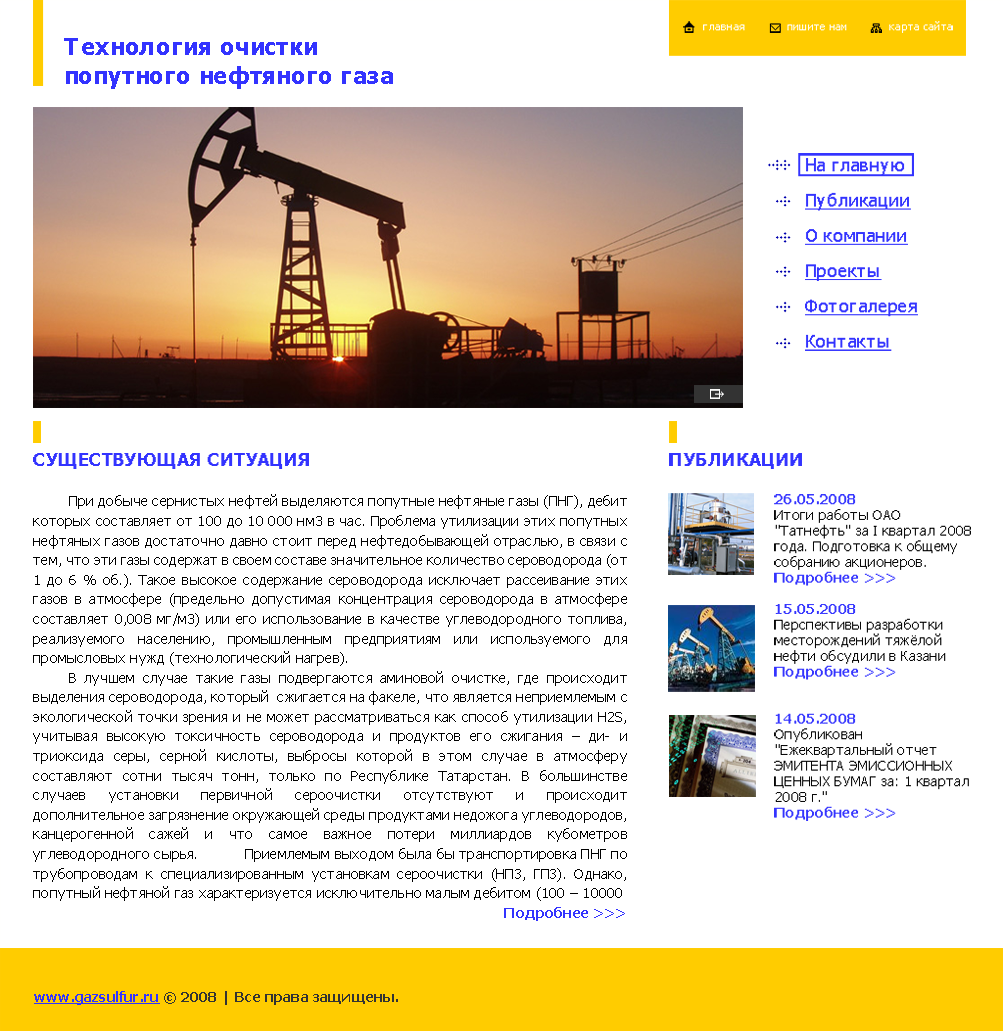
<style>
.page{position:relative;width:1003px;height:1031px;background:#ffffff}
.page>*{position:absolute;margin:0}
.t1{font:10.8px "Tahoma";letter-spacing:0.025em;color:#ffffff}
.t2{font:23.4px/29.4px "Tahoma-Bold";letter-spacing:0.025em;color:#3333ff}
.t3{font:17.6px/35.2px "Tahoma";letter-spacing:0.025em;color:#3333ff;text-decoration:underline}
.t4{font:17.6px/35.2px "Tahoma";letter-spacing:0.025em;color:#3333ff}
.t5{font:17.6px "Tahoma-Bold";letter-spacing:0.025em;color:#3333ff;text-transform:uppercase}
.t6{font:13.7px/19.6px "Tahoma";letter-spacing:0.025em;color:#000000}
.t7{font:13.7px/15.7px "Tahoma-Bold";letter-spacing:0.025em;color:#3333ff}
.t8{font:13.7px/15.7px "Tahoma";letter-spacing:0.025em;color:#000000}
.t9{font:13.7px "Tahoma-Bold";letter-spacing:0.025em;color:#333333}
.t10{font:13.7px "Tahoma-Bold";letter-spacing:0.025em;color:#3333ff;text-decoration:underline}
</style>
<div class="page">
<p class="t1" style="left:703px;top:21px;width:250px;height:12px">главная             пишите нам             карта сайта</p>
<p class="t2" style="left:64px;top:38px;width:329px;height:51px">Технология очистки <br>попутного нефтяного газа</p>
<p class="t3" style="left:805px;top:158px;width:113px;height:193px"><span class="t4">На главную<br></span>Публикации<br>О компании<br>Проекты<br>Фотогалерея<br>Контакты</p>
<p class="t5" style="left:33px;top:453px;width:276px;height:16px">Существующая ситуация</p>
<p class="t5" style="left:669px;top:453px;width:133px;height:16px">публикации</p>
<p class="t6" style="left:33px;top:494px;width:594px;height:427px;text-align:justify">При добыче сернистых нефтей выделяются попутные нефтяные газы (ПНГ), дебит которых составляет от 100 до 10 000 нм3 в час. Проблема утилизации этих попутных нефтяных газов достаточно давно стоит перед нефтедобывающей отраслью, в связи с тем, что эти газы содержат в своем составе значительное количество сероводорода (от 1 до 6 % об.). Такое высокое содержание сероводорода исключает рассеивание этих газов в атмосфере (предельно допустимая концентрация сероводорода в атмосфере составляет 0,008 мг/м3) или его использование в качестве углеводородного топлива, реализуемого населению, промышленным предприятиям или используемого для промысловых нужд (технологический нагрев).  <br> В лучшем случае такие газы подвергаются аминовой очистке, где происходит выделения сероводорода, который  сжигается на факеле, что является неприемлемым с экологической точки зрения и не может рассматриваться как способ утилизации H2S, учитывая высокую токсичность сероводорода и продуктов его сжигания – ди- и триоксида серы, серной кислоты, выбросы которой в этом случае в атмосферу составляют сотни тысяч тонн, только по Республике Татарстан. В большинстве случаев установки первичной сероочистки отсутствуют и происходит дополнительное загрязнение окружающей среды продуктами недожога углеводородов, канцерогенной сажей и что самое важное потери миллиардов кубометров углеводородного сырья.   Приемлемым выходом была бы транспортировка ПНГ по трубопроводам к специализированным установкам сероочистки (НПЗ, ГПЗ). Однако, попутный нефтяной газ характеризуется исключительно малым дебитом (100 – 10000                  <span class="t7">Подробнее &gt;&gt;&gt;</span></p>
<p class="t8" style="left:774px;top:494px;width:197px;height:327px;text-align:justify"><span class="t6">   </span><span class="t7">26.05.2008<br></span>   Итоги работы ОАО       "Татнефть" за I квартал 2008     года. Подготовка к общему     собранию акционеров.<br>   <span class="t7">Подробнее &gt;&gt;&gt;<br><br>   15.05.2008<br></span>   Перспективы разработки      месторождений тяжёлой      нефти обсудили в Казани<br>   <span class="t7">Подробнее &gt;&gt;&gt;<br><br><br>   14.05.2008<br></span>   Опубликован        "Ежеквартальный отчет      ЭМИТЕНТА ЭМИССИОННЫХ     ЦЕННЫХ БУМАГ за: 1 квартал     2008 г."<br>   <span class="t7">Подробнее &gt;&gt;&gt;</span></p>
<p class="t9" style="left:34px;top:991px;width:364px;height:14px"><span class="t10">www.gazsulfur.ru</span> © 2008 | Все права защищены.</p>
</div>
